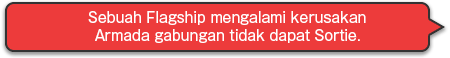
<style>
.page{position:relative;width:450px;height:58px;background:#ed3b3b}
.page>*{position:absolute;margin:0}
.t1{font:14px/18px "GothicMB101Pro-Regular";color:#ffffff}
</style>
<div class="page">
<p class="t1" style="left:88px;top:11px;width:278px;height:32px;text-align:center">Sebuah Flagship mengalami kerusakan<br>Armada gabungan tidak dapat Sortie.</p>
</div>
